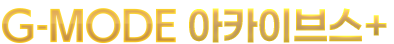
<style>
.page{position:relative;width:394px;height:44px;background:#ffffff}
.page>*{position:absolute;margin:0}
.t1{font:40px "Paperlogy-7Bold"}
</style>
<div class="page">
<p class="t1" style="left:189px;top:8px;width:198px;height:35px">아카이브스+</p>
</div>
